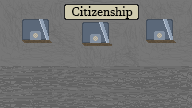
<style>
.page{position:relative;width:192px;height:108px;background:#777777}
.page>*{position:absolute;margin:0}
.t1{font:12.5px "JavaneseText";color:#000000}
</style>
<div class="page">
<p class="t1" style="left:72px;top:6px;width:61px;height:13px">Citizenship</p>
</div>
